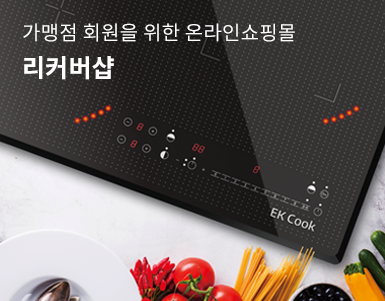
<style>
.page{position:relative;width:385px;height:301px}
.page>*{position:absolute;margin:0}
.t1{font:20px/37px "NotoSansCJKkr-Regular";letter-spacing:0.01em;color:#ffffff}
.t2{font:25px/37px "NotoSansCJKkr-Bold";letter-spacing:0.01em;color:#ffffff}
</style>
<div class="page">
<p class="t1" style="left:23px;top:23px;width:272px;height:57px">가맹점 회원을 위한 온라인쇼핑몰<br><span class="t2">리커버샵</span></p>
</div>
